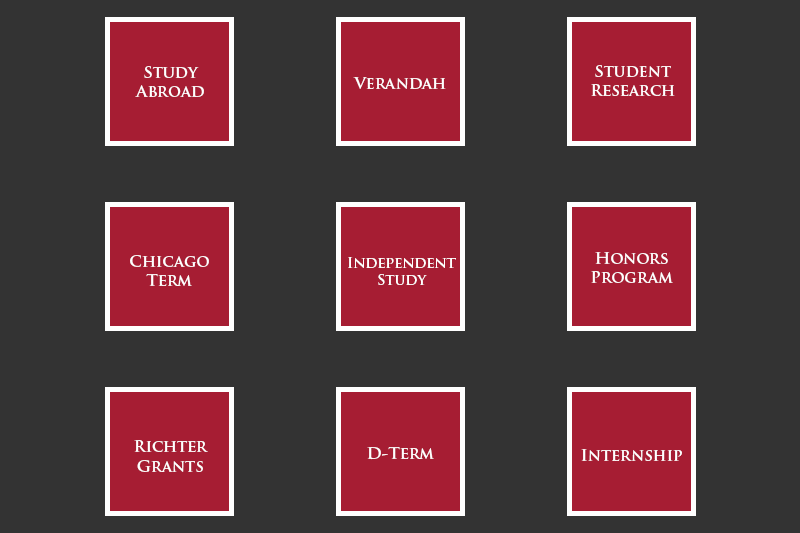
<style>
.page{position:relative;width:800px;height:533px;background:#333333}
.page>*{position:absolute;margin:0}
.t1{font:16px "TrajanPro-Bold";color:#ffffff}
.t2{font:14.5px "TrajanPro-Bold";color:#ffffff}
</style>
<div class="page">
<p class="t1" style="left:591px;top:65px;width:84px;height:31px;text-align:center">Student<br>Research</p>
<p class="t1" style="left:135px;top:66px;width:69px;height:31px;text-align:center">Study<br>Abroad</p>
<p class="t1" style="left:353px;top:77px;width:93px;height:12px">Verandah</p>
<p class="t1" style="left:130px;top:255px;width:79px;height:31px;text-align:center">Chicago<br>Term</p>
<p class="t2" style="left:348px;top:257px;width:108px;height:28px;text-align:center">Independent<br>Study</p>
<p class="t1" style="left:591px;top:252px;width:82px;height:31px;text-align:center">Honors<br>Program</p>
<p class="t1" style="left:134px;top:440px;width:74px;height:32px;text-align:center">Richter<br>Grants</p>
<p class="t1" style="left:367px;top:447px;width:67px;height:13px">D-Term</p>
<p class="t1" style="left:581px;top:449px;width:101px;height:12px">Internship</p>
</div>
